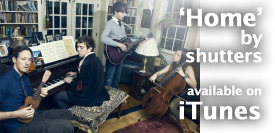
<style>
.page{position:relative;width:275px;height:133px}
.page>*{position:absolute;margin:0}
.t1{font:18px/18px "LucidaGrande-Bold";letter-spacing:-0.025em;color:#ffffff;font-weight:bold}
.t2{font:24px/14px "LucidaGrande-Bold";letter-spacing:-0.025em;color:#ffffff;font-weight:bold}
.t3{font:12px/24px "LucidaGrande-Bold";letter-spacing:-0.025em;color:#ffffff;font-weight:bold}
.t4{font:24px/24px "LucidaGrande-Bold";letter-spacing:-0.025em;color:#ffffff;font-weight:bold}
</style>
<div class="page">
<p class="t1" style="left:179px;top:7px;width:84px;height:56px;text-align:right"><span class="t2">‘Home’<br></span>by<br>shutters</p>
<p class="t3" style="left:179px;top:85px;width:83px;height:35px;text-align:right">available on<br><span class="t4">iTunes</span></p>
</div>
